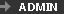
<style>
.page{position:relative;width:64px;height:14px;background:#333333}
.page>*{position:absolute;margin:0}
.t1{font:11px "Ebrima-Bold";color:#fcfbfb}
</style>
<div class="page">
<p class="t1" style="left:19px;top:3px;width:38px;height:8px">ADMIN</p>
</div>
